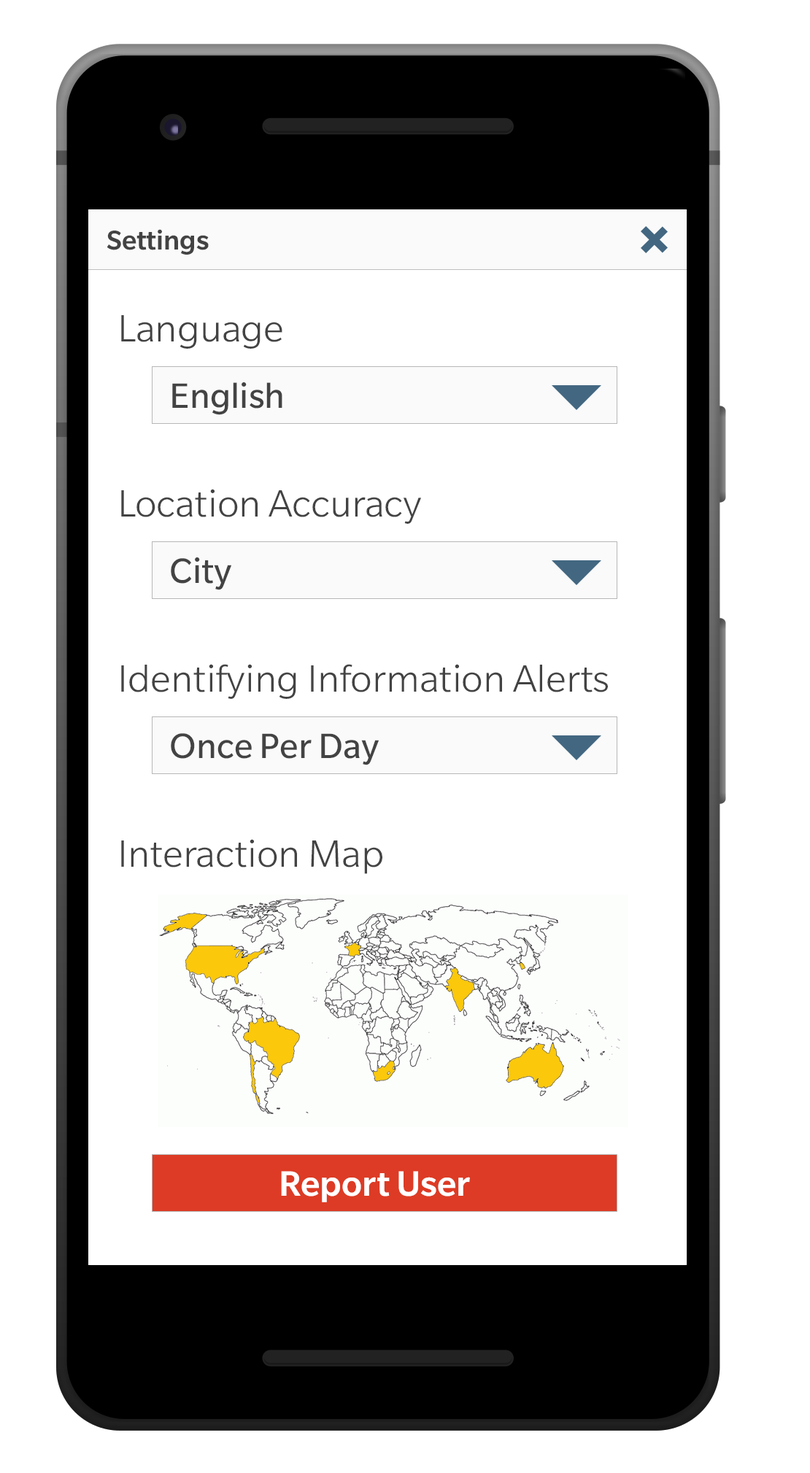
<style>
.page{position:relative;width:810px;height:1473px;background:#ffffff}
.page>*{position:absolute;margin:0}
.t1{font:26px "SlateForOnePlusMedium";color:#434343}
.t2{font:36.5px "SlateForOnePlusLight";color:#434343;scale:1.04 1}
.t3{font:34px "SlateForOnePlus-Regular";color:#434343}
.t4{font:34px "SlateForOnePlusMedium";color:#ffffff}
</style>
<div class="page">
<p class="t1" style="left:106px;top:229px;width:103px;height:26px">Settings</p>
<p class="t2" style="left:121px;top:315px;width:487px;height:559px">Language<br><br><br><br>Location Accuracy<br><br><br><br>Identifying Information Alerts<br><br><br><br>Interaction Map</p>
<p class="t3" style="left:172px;top:382px;width:110px;height:33px">English</p>
<p class="t3" style="left:171px;top:557px;width:60px;height:33px">City</p>
<p class="t3" style="left:171px;top:733px;width:208px;height:32px">Once Per Day</p>
<p class="t4" style="left:281px;top:1171px;width:189px;height:31px">Report User</p>
</div>
